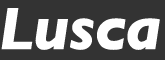
<style>
.page{position:relative;width:165px;height:60px;background:#333333}
.page>*{position:absolute;margin:0}
.t1{font:60.8px "GillSans-BoldItalic";color:#ffffff}
</style>
<div class="page">
<p class="t1" style="left:1px;top:8px;width:159px;height:42px">Lusca</p>
</div>
